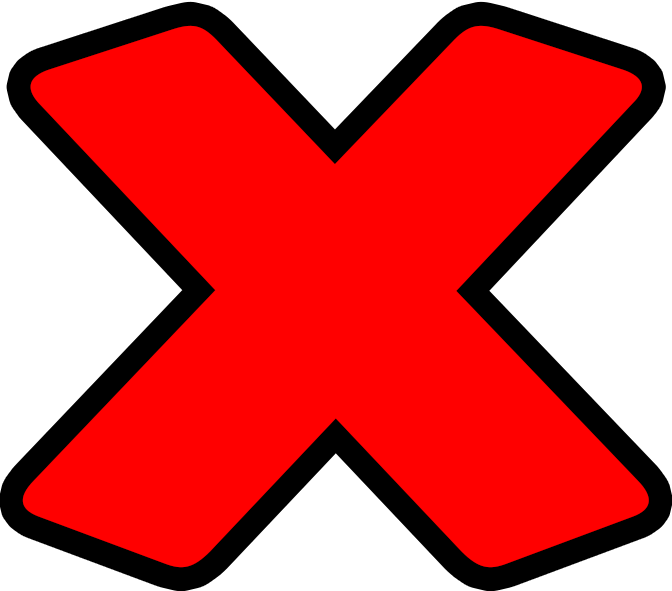
<style>
.page{position:relative;width:672px;height:591px;background:#ff0000}
.page>*{position:absolute;margin:0}
.t1{font:715.8px "CookieRunOTF-Black";color:#ff0000;scale:1.26 1}
</style>
<div class="page">
<p class="t1" style="left:22px;top:25px;width:627px;height:543px">X</p>
</div>
